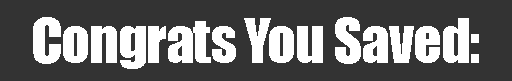
<style>
.page{position:relative;width:512px;height:81px;background:#333333}
.page>*{position:absolute;margin:0}
.t1{font:57px "Impact";letter-spacing:-0.02em;color:#ffffff}
</style>
<div class="page">
<p class="t1" style="left:33px;top:17px;width:446px;height:52px">Congrats You Saved:</p>
</div>
